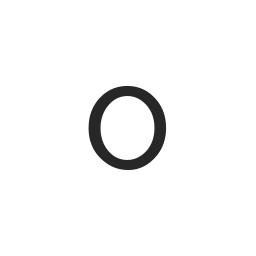
<style>
.page{position:relative;width:256px;height:256px;background:#ffffff}
.page>*{position:absolute;margin:0}
.t1{font:150px "AppleGothic";color:#282728}
</style>
<div class="page">
<p class="t1" style="left:88px;top:86px;width:79px;height:84px">o</p>
</div>
